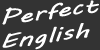
<style>
.page{position:relative;width:100px;height:50px;background:#333333}
.page>*{position:absolute;margin:0}
.t1{font:19.9px "MVBoli";color:#ffffff;scale:1.45 1}
</style>
<div class="page">
<p class="t1" style="left:2px;top:0px;width:97px;height:50px">Perfect<br>English</p>
</div>
